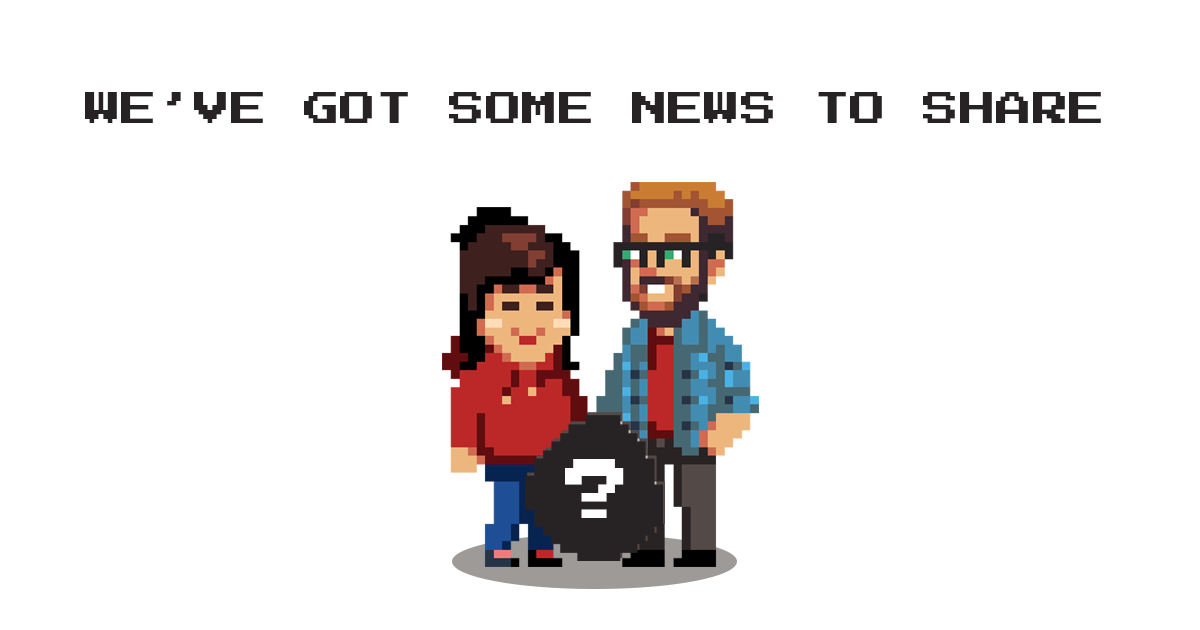
<style>
.page{position:relative;width:1200px;height:630px;background:#ffffff}
.page>*{position:absolute;margin:0}
.t1{font:36.5px "PressStart2P-Regular";color:#272324}
.t2{font:66.4px "PressStart2P-Regular";color:#ffffff}
</style>
<div class="page">
<p class="t1" style="left:85px;top:92px;width:1016px;height:31px">WE’VE GOT SOME NEWS TO SHARE</p>
<p class="t2" style="left:565px;top:459px;width:59px;height:59px">?</p>
</div>
